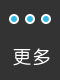
<style>
.page{position:relative;width:60px;height:80px;background:#333333}
.page>*{position:absolute;margin:0}
.t1{font:18px "STYuanti-SC-Regular";letter-spacing:0.1em;color:#ffffff}
</style>
<div class="page">
<p class="t1" style="left:13px;top:48px;width:37px;height:18px">更多</p>
</div>
